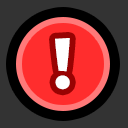
<style>
.page{position:relative;width:128px;height:128px;background:#333333}
.page>*{position:absolute;margin:0}
.t1{font:69.4px "VoodooCasual-Bold";color:#ffffff}
</style>
<div class="page">
<p class="t1" style="left:55px;top:38px;width:15px;height:52px">!</p>
</div>
